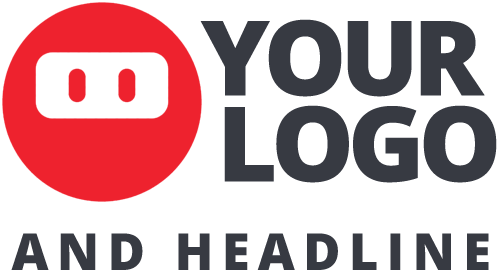
<style>
.page{position:relative;width:499px;height:280px;background:#ffffff}
.page>*{position:absolute;margin:0}
.t1{font:104px/86px "OpenSans-Extrabold";letter-spacing:-0.06em;color:#373a42}
.t2{font:51px "OpenSans-Extrabold";letter-spacing:0.16em;color:#373a42}
</style>
<div class="page">
<p class="t1" style="left:200px;top:19px;width:297px;height:164px;text-align:center">YOUR<br>  LOGO</p>
<p class="t2" style="left:11px;top:233px;width:478px;height:37px">AND HEADLINE</p>
</div>
